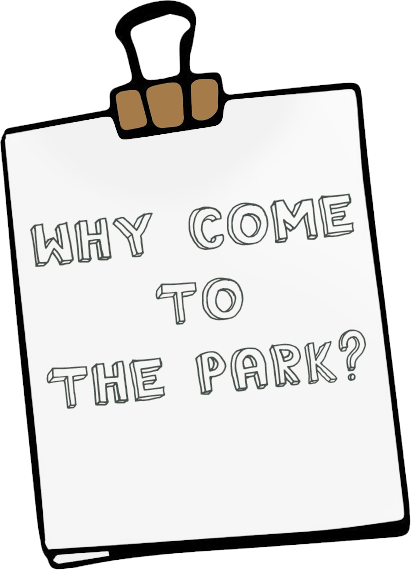
<style>
.page{position:relative;width:411px;height:570px;background:#f6f6f6}
.page>*{position:absolute;margin:0}
.t1{font:60px "TheRainmaker";color:#475149}
</style>
<div class="page">
<p class="t1" style="left:30px;top:193px;width:336px;height:216px;text-align:center;rotate:-6deg">Why come <br>to <br>The Park?</p>
</div>
